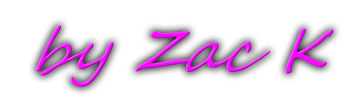
<style>
.page{position:relative;width:360px;height:96px;background:#ffffff}
.page>*{position:absolute;margin:0}
.t1{font:64.1px "SegoeScript";scale:0.94 1}
</style>
<div class="page">
<p class="t1" style="left:36px;top:25px;width:298px;height:62px">by Zac K</p>
</div>
